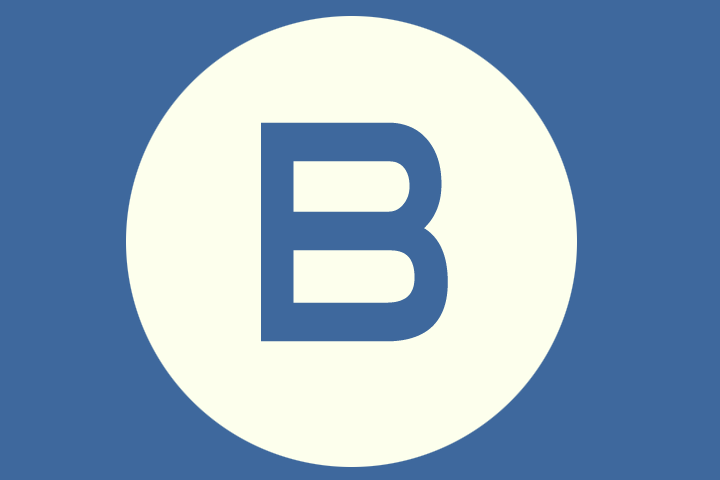
<style>
.page{position:relative;width:720px;height:480px;background:#3e689d}
.page>*{position:absolute;margin:0}
.t1{font:292.2px "BlairMdITCTTMedium";letter-spacing:0.05em;color:#3e689d;font-weight:bold;scale:0.72 1}
</style>
<div class="page">
<p class="t1" style="left:261px;top:122px;width:187px;height:220px">B</p>
</div>
